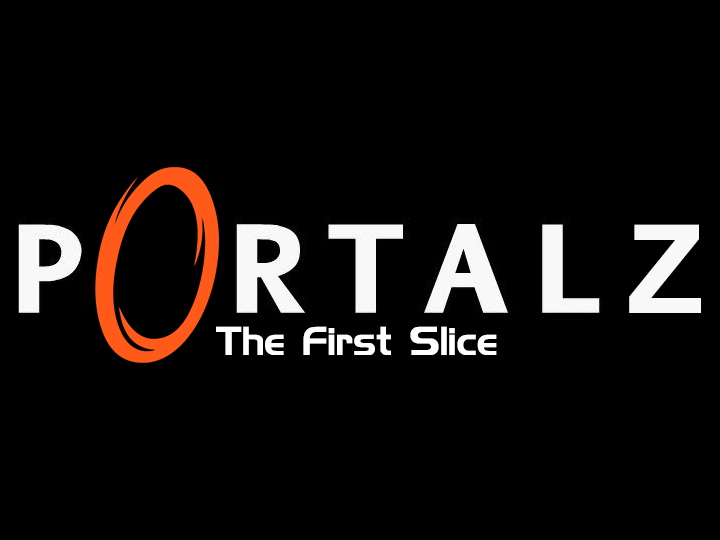
<style>
.page{position:relative;width:720px;height:540px;background:#000000}
.page>*{position:absolute;margin:0}
.t1{font:123px "Arial-BoldMT";color:#f8f8f8}
.t2{font:36px "HamiltonSteel";color:#ffffff}
</style>
<div class="page">
<p class="t1" style="left:629px;top:224px;width:72px;height:89px">Z</p>
<p class="t2" style="left:216px;top:326px;width:281px;height:29px">The First Slice</p>
</div>
